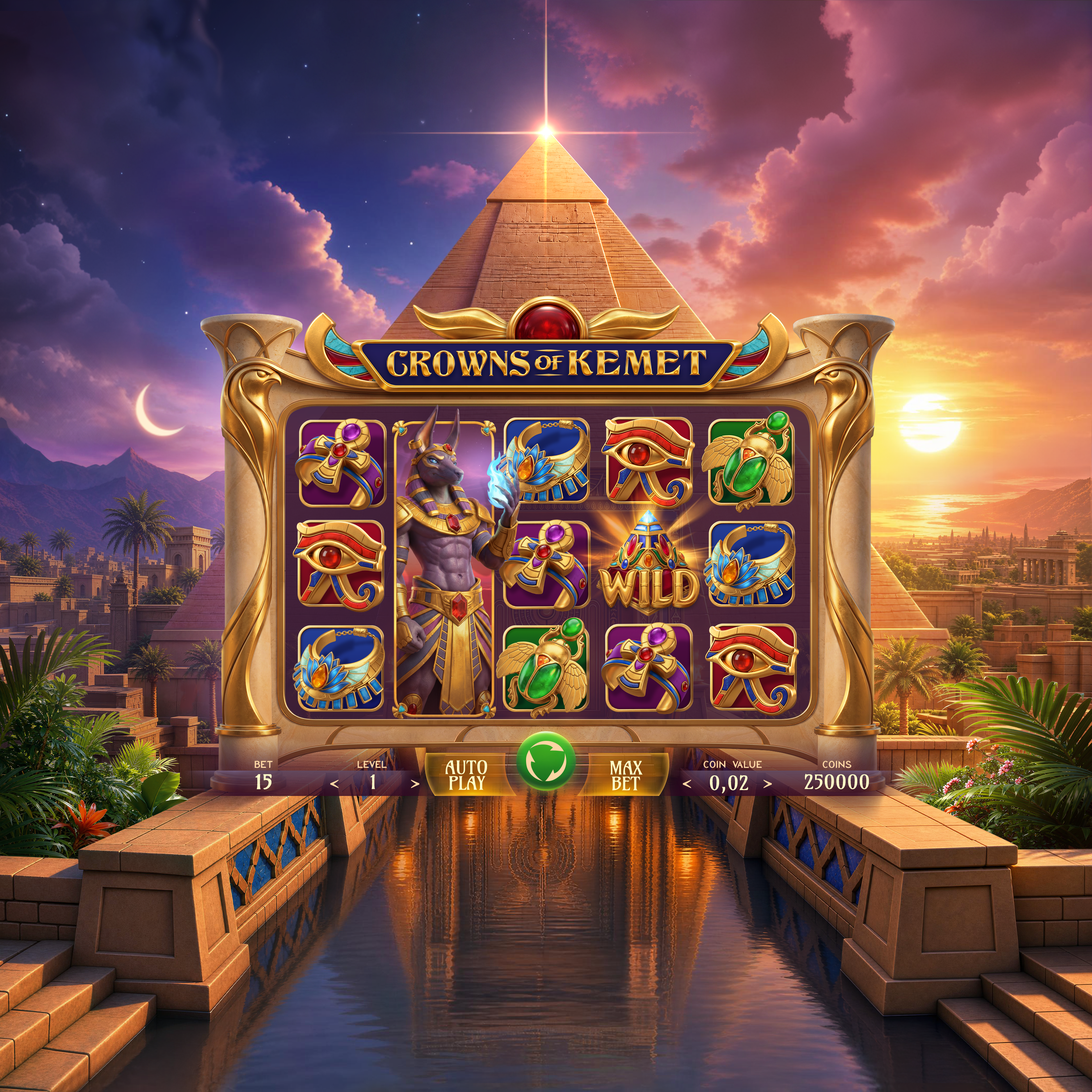
<style>
.page{position:relative;width:1092px;height:1092px}
.page>*{position:absolute;margin:0}
.t1{font:16.4px "HIVNotRetro-Regular";color:#ffd8a6;font-variant:small-caps}
.t2{font:18.4px/15.7px "Amarante-Regular";color:#fffec8;text-transform:uppercase}
.t3{font:19.5px "Amarante-Regular";color:#fffec8}
.t4{font:19.5px "Amarante-Regular";color:#fffec8;font-weight:bold}
.t5{font:19.5px "Amarante-Regular";color:#ffd8a6}
</style>
<div class="page">
<p class="t1" style="left:255px;top:761px;width:18px;height:7px">bet</p>
<p class="t1" style="left:357px;top:760px;width:30px;height:8px">level</p>
<p class="t2" style="left:445px;top:760px;width:42px;height:30px;text-align:center">auto<br>play</p>
<p class="t2" style="left:610px;top:761px;width:33px;height:29px;text-align:center">max<br>bet</p>
<p class="t1" style="left:703px;top:760px;width:59px;height:8px">coin value</p>
<p class="t1" style="left:823px;top:760px;width:28px;height:8px">coins</p>
<p class="t3" style="left:805px;top:774px;width:64px;height:15px">250000</p>
<p class="t4" style="left:255px;top:774px;width:17px;height:16px">15</p>
<p class="t5" style="left:330px;top:780px;width:9px;height:8px;rotate:180deg">&gt;</p>
<p class="t3" style="left:370px;top:774px;width:5px;height:15px">1</p>
<p class="t5" style="left:411px;top:780px;width:8px;height:8px">&gt;</p>
<p class="t5" style="left:683px;top:780px;width:8px;height:8px;rotate:180deg">&gt;</p>
<p class="t3" style="left:710px;top:775px;width:38px;height:19px">0,02</p>
<p class="t5" style="left:764px;top:780px;width:8px;height:8px">&gt;</p>
</div>
